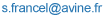
<style>
.page{position:relative;width:107px;height:18px;background:#ffffff}
.page>*{position:absolute;margin:0}
.t1{font:13px "ArialMT";letter-spacing:-0.02em;color:#2c79b3}
</style>
<div class="page">
<p class="t1" style="left:2px;top:3px;width:101px;height:12px">s.francel@avine.fr</p>
</div>
